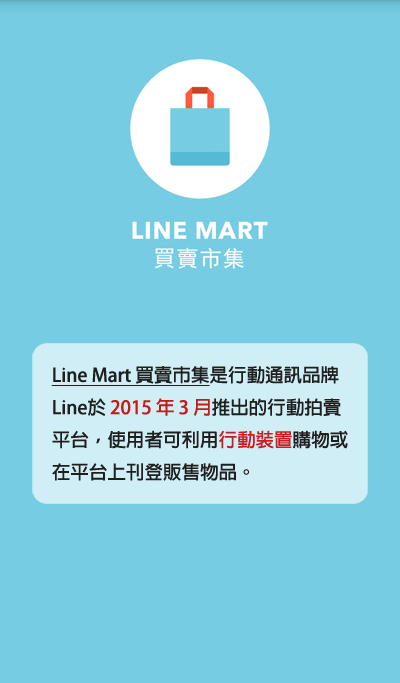
<style>
.page{position:relative;width:400px;height:683px;background:#76cde3}
.page>*{position:absolute;margin:0}
.t1{font:18.5px "AdobeFanHeitiStd-Bold";color:#201f1f}
.t2{font:18.5px "AdobeFanHeitiStd-Bold";color:#201f1f;text-decoration:underline}
.t3{font:18.5px "AdobeFanHeitiStd-Bold";color:#c91818}
.t4{font:18.5px "AdobeFanHeitiStd-Bold";color:#c91e1f}
</style>
<div class="page">
<p class="t1" style="left:51px;top:366px;width:297px;height:115px"><span class="t2">Line Mart 買賣市集</span>是行動通訊品牌<br>Line於<span class="t3"> 2015 年 3 月</span>推出的行動拍賣<br>平台，使用者可利用<span class="t4">行動裝置</span>購物或<br>在平台上刊登販售物品。</p>
</div>
